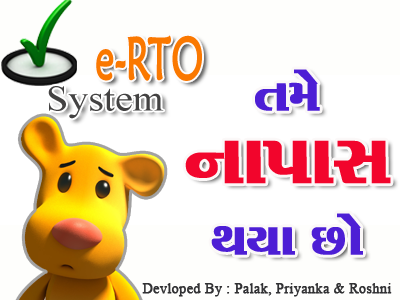
<style>
.page{position:relative;width:400px;height:300px;background:#fefefc}
.page>*{position:absolute;margin:0}
.t1{font:59.1px "MaiandraGD-Regular";color:#fa7800;font-weight:bold;scale:0.63 1}
.t2{font:90px/72px "Maruti";color:#f2052c;font-weight:bold}
.t3{font:58.6px/72px "Maruti";color:#4d1ed5;font-weight:bold}
.t4{font:36.3px "TimesNewRomanPSMT";color:#434242;scale:1.1 1}
.t5{font:14.2px "TimesNewRomanPSMT";color:#313133;font-weight:bold}
</style>
<div class="page">
<p class="t1" style="left:96px;top:35px;width:106px;height:46px">e-RTO</p>
<p class="t2" style="left:185px;top:69px;width:206px;height:186px;text-align:center"><span class="t3">ík{u<br></span>LkkÃkkMk<span class="t3"> <br>ÚkÞk Aku</span></p>
<p class="t4" style="left:48px;top:86px;width:116px;height:33px">System</p>
<p class="t5" style="left:142px;top:283px;width:250px;height:14px">Devloped By : Palak, Priyanka &amp; Roshni</p>
</div>
